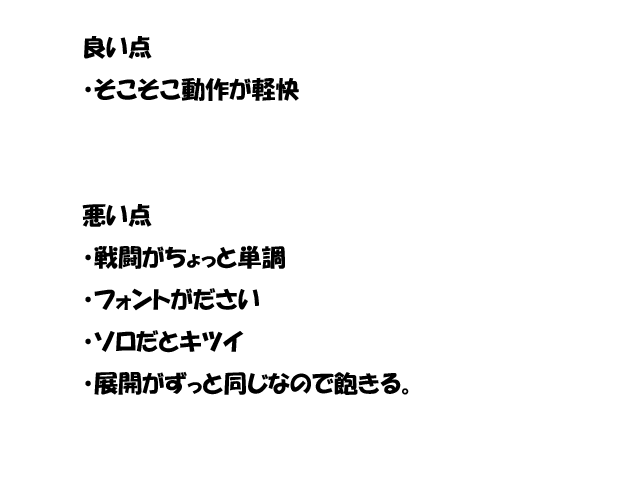
<style>
.page{position:relative;width:640px;height:480px;background:#ffffff}
.page>*{position:absolute;margin:0}
.t1{font:24px "HGPSoeiKakupoptai";color:#000000}
</style>
<div class="page">
<p class="t1" style="left:82px;top:36px;width:327px;height:359px">良い点<br>・そこそこ動作が軽快<br><br><br>悪い点<br>・戦闘がちょっと単調<br>・フォントがださい<br>・ソロだとキツイ<br>・展開がずっと同じなので飽きる。</p>
</div>
